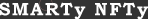
<style>
.page{position:relative;width:148px;height:19px;background:#333333}
.page>*{position:absolute;margin:0}
.t1{font:18px "BookmanOldStyle-Bold";letter-spacing:0.08em;color:#ffffff}
</style>
<div class="page">
<p class="t1" style="left:0px;top:2px;width:148px;height:18px">SMARTy NFTy</p>
</div>
